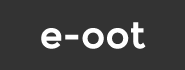
<style>
.page{position:relative;width:185px;height:70px;background:#333333}
.page>*{position:absolute;margin:0}
.t1{font:36px "Montserrat-Regular";color:#ffffff;font-weight:bold}
</style>
<div class="page">
<p class="t1" style="left:41px;top:22px;width:105px;height:27px">e-oot</p>
</div>
